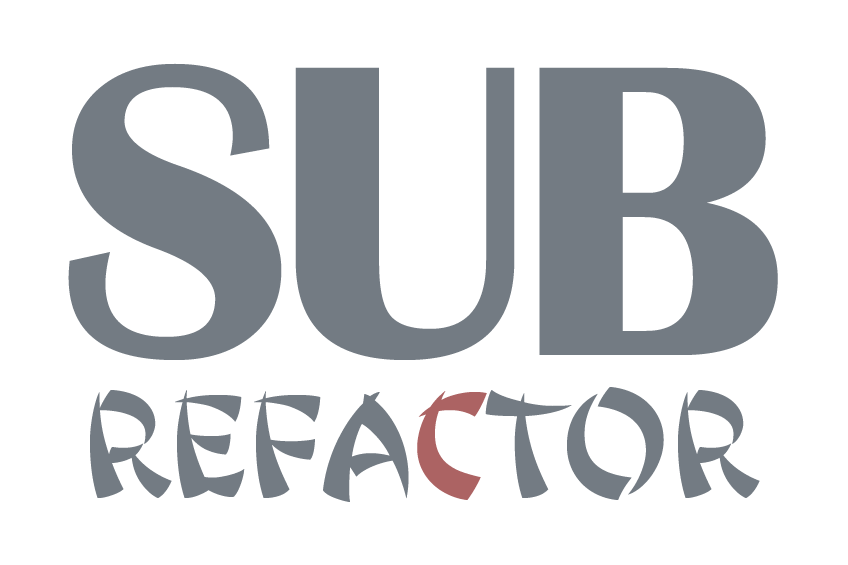
<style>
.page{position:relative;width:848px;height:565px;background:#ffffff}
.page>*{position:absolute;margin:0}
.t1{font:429.7px "BritannicBold";letter-spacing:-0.045em;color:#737b83}
.t2{font:131.9px "JingJing";letter-spacing:-0.045em;color:#737b83;scale:1.04 1}
.t3{font:131.9px "JingJing";letter-spacing:-0.045em;color:#ac6363;scale:1.04 1}
</style>
<div class="page">
<p class="t1" style="left:68px;top:63px;width:710px;height:297px">SUB</p>
<p class="t2" style="left:90px;top:387px;width:670px;height:115px">refa<span class="t3">c</span>tor</p>
</div>
